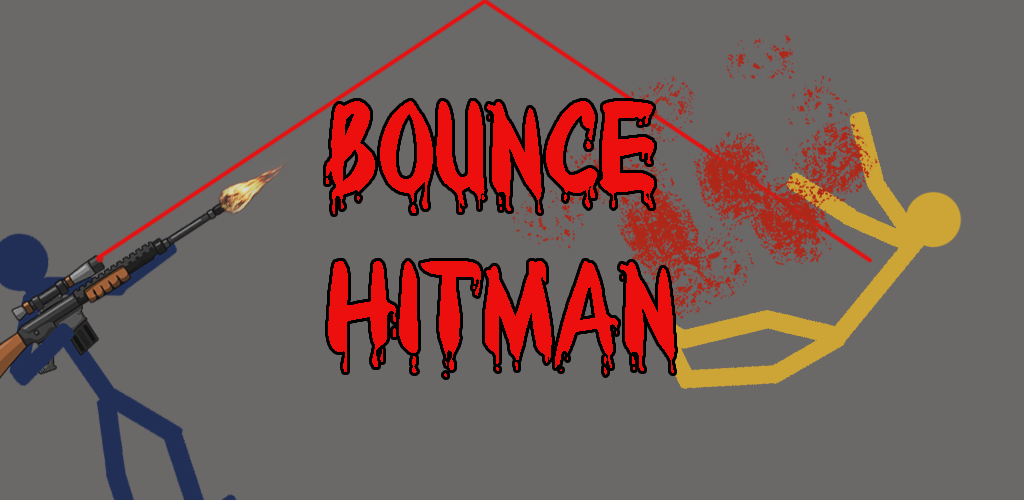
<style>
.page{position:relative;width:1024px;height:500px;background:#6b6868}
.page>*{position:absolute;margin:0}
.t1{font:117.2px "Bloody";color:#ed0e0e}
</style>
<div class="page">
<p class="t1" style="left:326px;top:101px;width:328px;height:113px">BOUNCE</p>
<p class="t1" style="left:328px;top:261px;width:347px;height:116px">HITMAN</p>
</div>
